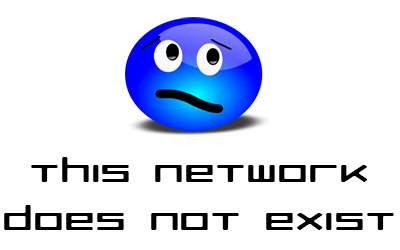
<style>
.page{position:relative;width:400px;height:250px;background:#ffffff}
.page>*{position:absolute;margin:0}
.t1{font:32px "RazerRegular";color:#000000;scale:1.5 1}
</style>
<div class="page">
<p class="t1" style="left:4px;top:157px;width:390px;height:73px;text-align:center">this network<br>does not exist</p>
</div>
